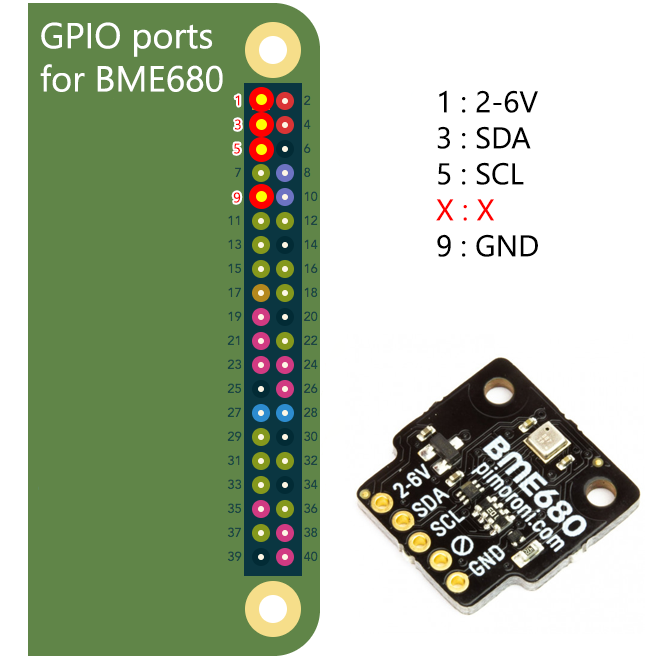
<style>
.page{position:relative;width:670px;height:661px;background:#ffffff}
.page>*{position:absolute;margin:0}
.t1{font:36px "SegoeUI";color:#ffffff}
.t2{font:14px "SegoeUI";color:#ff0000}
.t3{font:30px "SegoeUI";color:#000000}
.t4{font:30px "SegoeUI";color:#ff0000}
</style>
<div class="page">
<p class="t1" style="left:40px;top:22px;width:183px;height:70px">GPIO ports<br>for BME680</p>
<p class="t2" style="left:235px;top:95px;width:5px;height:11px">1</p>
<p class="t3" style="left:436px;top:90px;width:102px;height:167px">1 : 2-6V<br>3 : SDA<br>5 : SCL<br><span class="t4">X : X<br></span>9 : GND</p>
<p class="t2" style="left:235px;top:119px;width:6px;height:11px">3</p>
<p class="t2" style="left:234px;top:143px;width:6px;height:11px">5</p>
<p class="t2" style="left:233px;top:192px;width:8px;height:11px">9</p>
</div>
